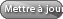
<style>
.page{position:relative;width:63px;height:19px}
.page>*{position:absolute;margin:0}
.t1{font:9.8px "MyriadPro-Regular";letter-spacing:0.06em;color:#ffffff}
</style>
<div class="page">
<p class="t1" style="left:5px;top:5px;width:60px;height:9px">Mettre à jour</p>
</div>
